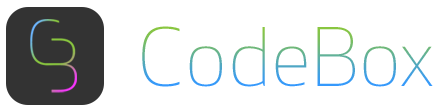
<style>
.page{position:relative;width:447px;height:110px;background:#ffffff}
.page>*{position:absolute;margin:0}
.t1{font:78.5px "ApexNew-Light";letter-spacing:0.01em}
</style>
<div class="page">
<p class="t1" style="left:142px;top:26px;width:291px;height:61px">CodeBox</p>
</div>
